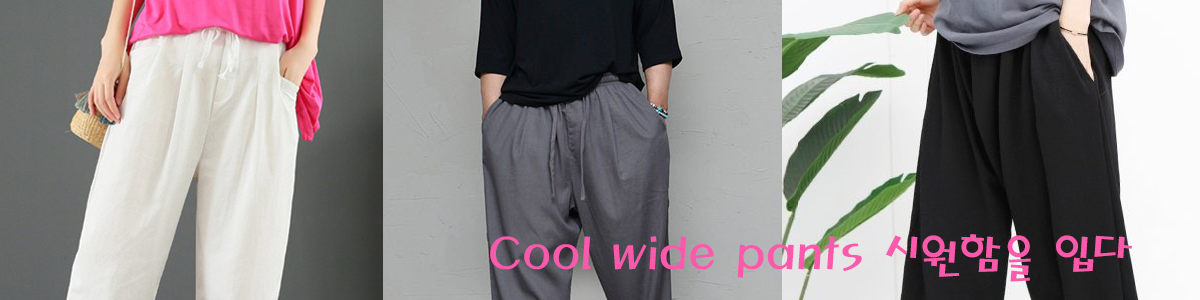
<style>
.page{position:relative;width:1200px;height:300px}
.page>*{position:absolute;margin:0}
.t1{font:48px "MagicR-HM";color:#fa59ac}
</style>
<div class="page">
<p class="t1" style="left:490px;top:234px;width:642px;height:48px">Cool wide pants 시원함을 입다</p>
</div>
